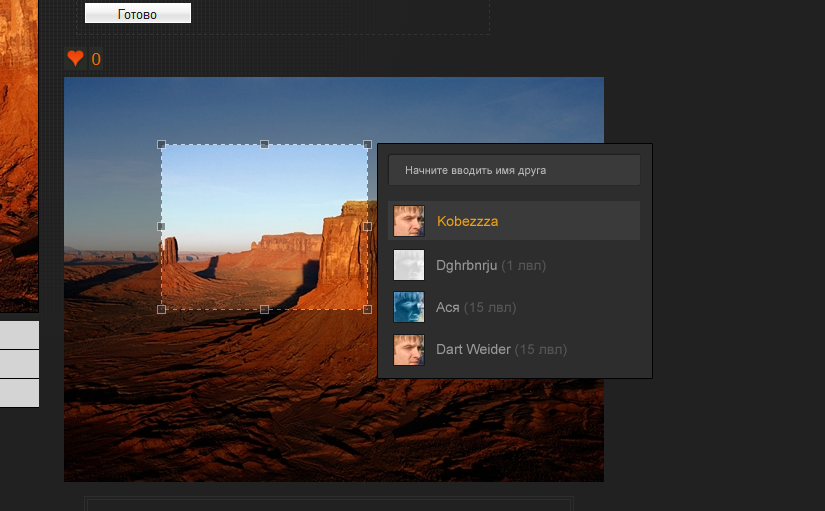
<style>
.page{position:relative;width:825px;height:511px;background:#212121}
.page>*{position:absolute;margin:0}
.t1{font:11px "ArialMT";color:#b7b7b7}
.t2{font:14px "ArialMT";color:#ee9f15}
.t3{font:14px "ArialMT";color:#999999}
.t4{font:14px "ArialMT";color:#555555}
</style>
<div class="page">
<p class="t1" style="left:406px;top:166px;width:140px;height:11px">Начните вводить имя друга</p>
<p class="t2" style="left:438px;top:216px;width:60px;height:10px">Kobezzza</p>
<p class="t3" style="left:437px;top:260px;width:109px;height:13px">Dghrbnrju <span class="t4">(1 лвл)</span></p>
<p class="t4" style="left:436px;top:302px;width:80px;height:13px"><span class="t3">Ася </span>(15 лвл)</p>
<p class="t3" style="left:437px;top:344px;width:130px;height:13px">Dart Weider <span class="t4">(15 лвл)</span></p>
</div>
